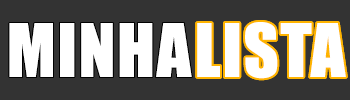
<style>
.page{position:relative;width:350px;height:100px;background:#333333}
.page>*{position:absolute;margin:0}
.t1{font:68px "Impact";letter-spacing:0.025em;color:#ffffff}
</style>
<div class="page">
<p class="t1" style="left:9px;top:23px;width:183px;height:54px">MINHA</p>
<p class="t1" style="left:197px;top:22px;width:149px;height:57px">LISTA</p>
</div>
